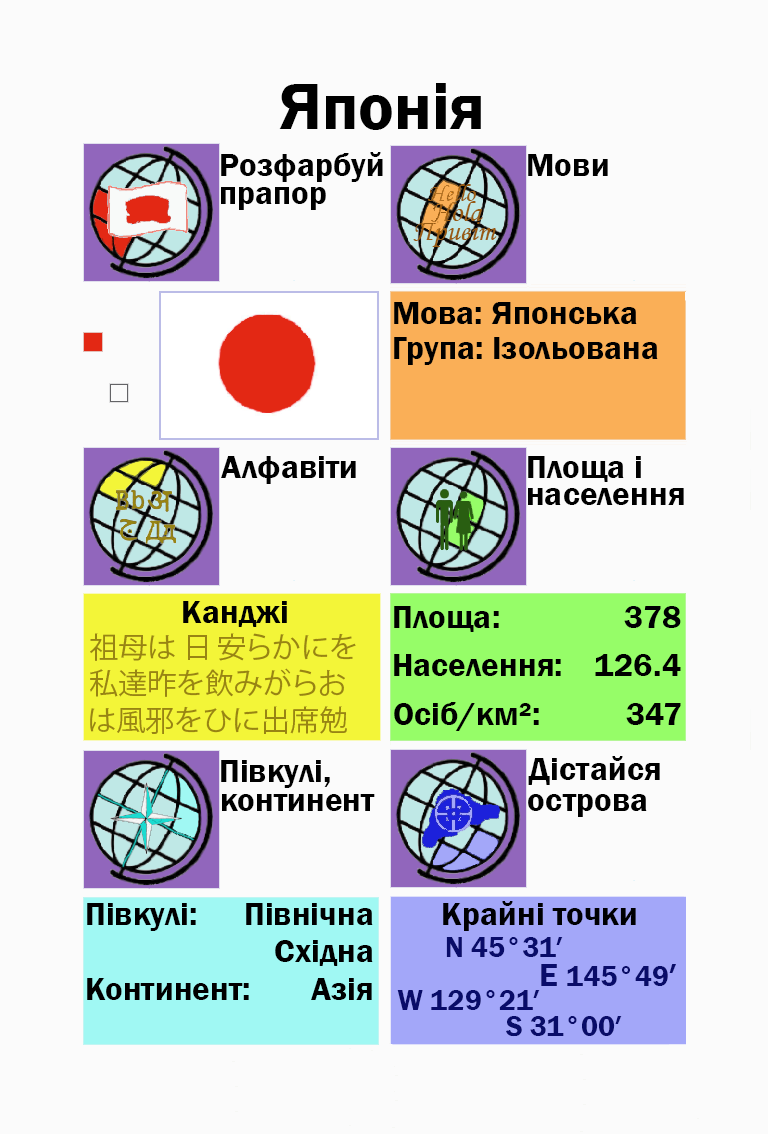
<style>
.page{position:relative;width:768px;height:1134px;background:#fbfbfb}
.page>*{position:absolute;margin:0}
.t1{font:66.7px "FranklinGothic-Demi";color:#000000}
.t2{font:33.3px "FranklinGothic-Demi";color:#000000}
.t3{font:33.3px "FranklinGothic-Demi";color:#000003}
.t4{font:29.2px "KozGoPr6N-Regular";color:#988413}
.t5{font:29.2px "FranklinGothic-Demi";color:#988413}
.t6{font:29.2px "FranklinGothic-Demi";color:#090c69}
.t7{font:33.3px "FranklinGothic-Demi";color:#090c69}
</style>
<div class="page">
<p class="t1" style="left:279px;top:83px;width:202px;height:47px">Японія</p>
<p class="t2" style="left:221px;top:152px;width:162px;height:30px">Розфарбуй</p>
<p class="t2" style="left:528px;top:154px;width:80px;height:22px">Мови</p>
<p class="t2" style="left:221px;top:187px;width:105px;height:23px">прапор</p>
<p class="t2" style="left:394px;top:302px;width:243px;height:22px">Мова: Японська</p>
<p class="t2" style="left:394px;top:337px;width:264px;height:28px">Група: Ізольована</p>
<p class="t2" style="left:221px;top:456px;width:135px;height:28px">Алфавіти</p>
<p class="t2" style="left:528px;top:456px;width:113px;height:26px">Площа і</p>
<p class="t2" style="left:528px;top:488px;width:156px;height:17px">населення</p>
<p class="t2" style="left:183px;top:601px;width:104px;height:26px">Канджі</p>
<p class="t2" style="left:394px;top:606px;width:105px;height:26px">Площа:</p>
<p class="t3" style="left:624px;top:606px;width:57px;height:22px">378</p>
<p class="t4" style="left:90px;top:633px;width:266px;height:28px"><span class="t5"><br></span>祖母は 日 安らかにを</p>
<p class="t2" style="left:394px;top:654px;width:167px;height:22px">Населення:</p>
<p class="t2" style="left:595px;top:654px;width:86px;height:22px">126.4</p>
<p class="t4" style="left:90px;top:668px;width:255px;height:29px">私達昨を飲みがらお</p>
<p class="t2" style="left:394px;top:702px;width:145px;height:29px">Осіб/км²:</p>
<p class="t4" style="left:90px;top:706px;width:257px;height:28px">は風邪をひに出席勉</p>
<p class="t2" style="left:626px;top:703px;width:55px;height:22px">347</p>
<p class="t2" style="left:221px;top:760px;width:109px;height:28px">Півкулі,</p>
<p class="t2" style="left:528px;top:756px;width:132px;height:29px">Дістайся</p>
<p class="t2" style="left:222px;top:794px;width:153px;height:17px">континент</p>
<p class="t2" style="left:528px;top:794px;width:119px;height:23px">острова</p>
<p class="t2" style="left:87px;top:903px;width:109px;height:28px">Півкулі:</p>
<p class="t2" style="left:246px;top:903px;width:127px;height:22px">Північна</p>
<p class="t3" style="left:443px;top:901px;width:193px;height:30px">Крайні точки</p>
<p class="t2" style="left:275px;top:940px;width:98px;height:26px">Східна</p>
<p class="t6" style="left:446px;top:937px;width:117px;height:20px">N 45°31′</p>
<p class="t6" style="left:541px;top:964px;width:135px;height:22px"><span class="t7">E </span>145°49<span class="t7">′</span></p>
<p class="t2" style="left:87px;top:978px;width:162px;height:22px">Континент:</p>
<p class="t2" style="left:311px;top:978px;width:61px;height:22px">Азія</p>
<p class="t6" style="left:397px;top:990px;width:143px;height:20px">W 129°21′</p>
<p class="t6" style="left:506px;top:1016px;width:116px;height:21px">S 31°00′</p>
</div>
